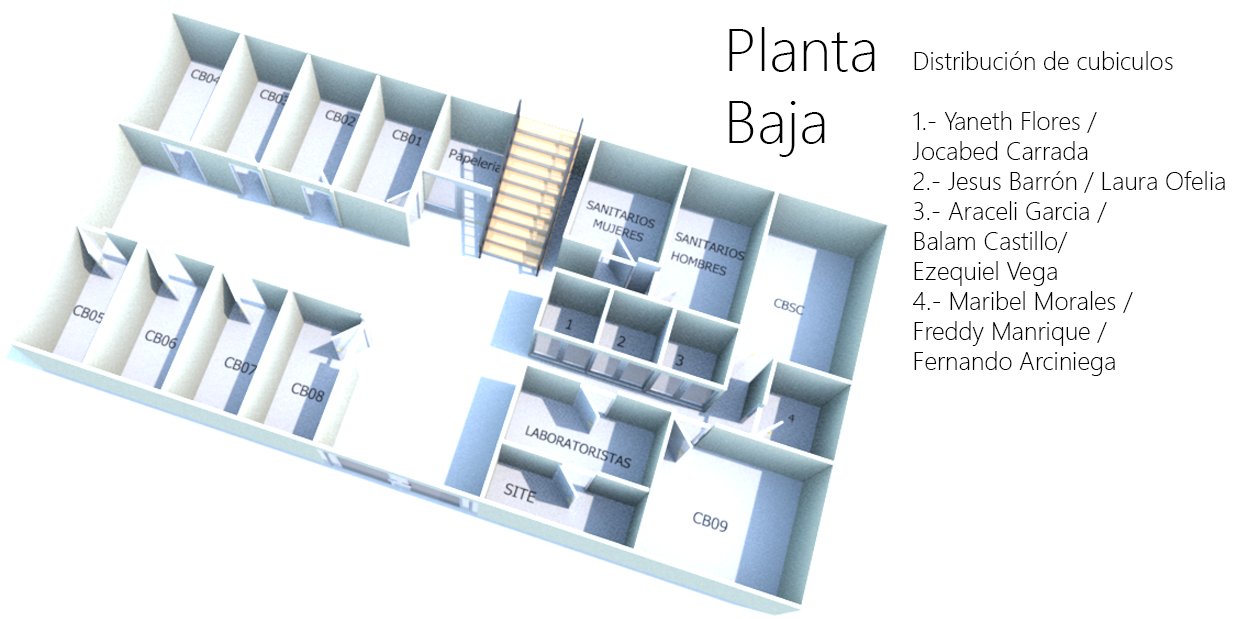
<style>
.page{position:relative;width:1238px;height:619px;background:#ffffff}
.page>*{position:absolute;margin:0}
.t1{font:60px "SegoeUI-Light";color:#000000}
.t2{font:25px "SegoeUI-Light";color:#000000}
</style>
<div class="page">
<p class="t1" style="left:729px;top:27px;width:146px;height:130px">Planta <br>Baja</p>
<p class="t2" style="left:912px;top:51px;width:313px;height:325px">Distribución de cubiculos<br><br>1.- Yaneth Flores / <br>Jocabed Carrada<br>2.- Jesus Barrón / Laura Ofelia<br>3.- Araceli Garcia / <br>Balam Castillo/<br>Ezequiel Vega<br>4.- Maribel Morales / <br>Freddy Manrique /<br>Fernando Arciniega</p>
</div>
